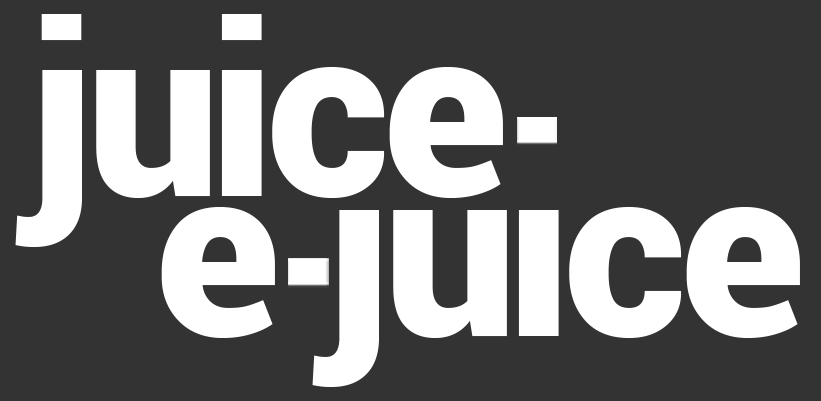
<style>
.page{position:relative;width:821px;height:401px;background:#333333}
.page>*{position:absolute;margin:0}
.t1{font:239.4px "Roboto-Black";letter-spacing:-0.01em;color:#ffffff}
</style>
<div class="page">
<p class="t1" style="left:15px;top:14px;width:488px;height:233px">juice</p>
<p class="t1" style="left:161px;top:154px;width:639px;height:233px">e juice</p>
</div>
